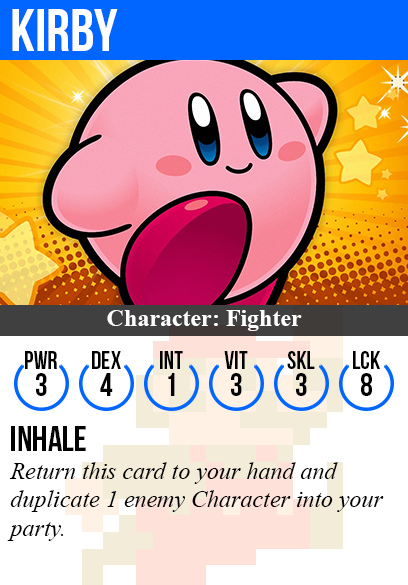
<style>
.page{position:relative;width:408px;height:585px;background:#ffffff}
.page>*{position:absolute;margin:0}
.t1{font:60px "BebasNeue";color:#ffffff}
.t2{font:24px "TimesNewRomanPS-BoldMT";color:#ffffff}
.t3{font:25px "BebasNeue";color:#000000}
.t4{font:32px "BebasNeue";color:#000000}
.t5{font:36px "BebasNeue";color:#000000}
.t6{font:24px "TimesNewRomanPS-ItalicMT";color:#000000}
</style>
<div class="page">
<p class="t1" style="left:12px;top:9px;width:106px;height:42px">kirby</p>
<p class="t2" style="left:107px;top:310px;width:195px;height:21px">Character: Fighter</p>
<p class="t3" style="left:25px;top:351px;width:32px;height:18px">PWR</p>
<p class="t3" style="left:92px;top:351px;width:29px;height:18px">dex</p>
<p class="t3" style="left:160px;top:351px;width:23px;height:18px">int</p>
<p class="t3" style="left:224px;top:351px;width:24px;height:18px">vit</p>
<p class="t3" style="left:287px;top:351px;width:28px;height:18px">skl</p>
<p class="t3" style="left:353px;top:351px;width:27px;height:18px">lck</p>
<p class="t4" style="left:36px;top:373px;width:11px;height:23px">3</p>
<p class="t4" style="left:100px;top:373px;width:13px;height:23px">4</p>
<p class="t4" style="left:168px;top:373px;width:7px;height:23px">1</p>
<p class="t4" style="left:231px;top:373px;width:11px;height:23px">3</p>
<p class="t4" style="left:296px;top:373px;width:11px;height:23px">3</p>
<p class="t4" style="left:361px;top:373px;width:11px;height:23px">8</p>
<p class="t5" style="left:11px;top:426px;width:75px;height:25px">inhale</p>
<p class="t6" style="left:7px;top:462px;width:377px;height:79px">Return this card to your hand and<br>duplicate 1 enemy Character into your<br>party.</p>
</div>
